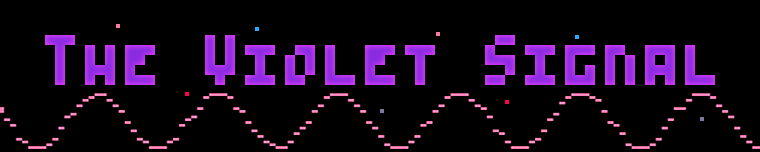
<style>
.page{position:relative;width:760px;height:152px;background:#000000}
.page>*{position:absolute;margin:0}
.t1{font:40px "PICO-8"}
</style>
<div class="page">
<p class="t1" style="left:45px;top:35px;width:670px;height:50px">The Violet Signal</p>
</div>
